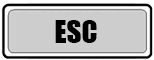
<style>
.page{position:relative;width:154px;height:60px;background:#cdcdcd}
.page>*{position:absolute;margin:0}
.t1{font:29.3px "Impact";color:#000000}
</style>
<div class="page">
<p class="t1" style="left:55px;top:20px;width:42px;height:23px">ESC</p>
</div>
